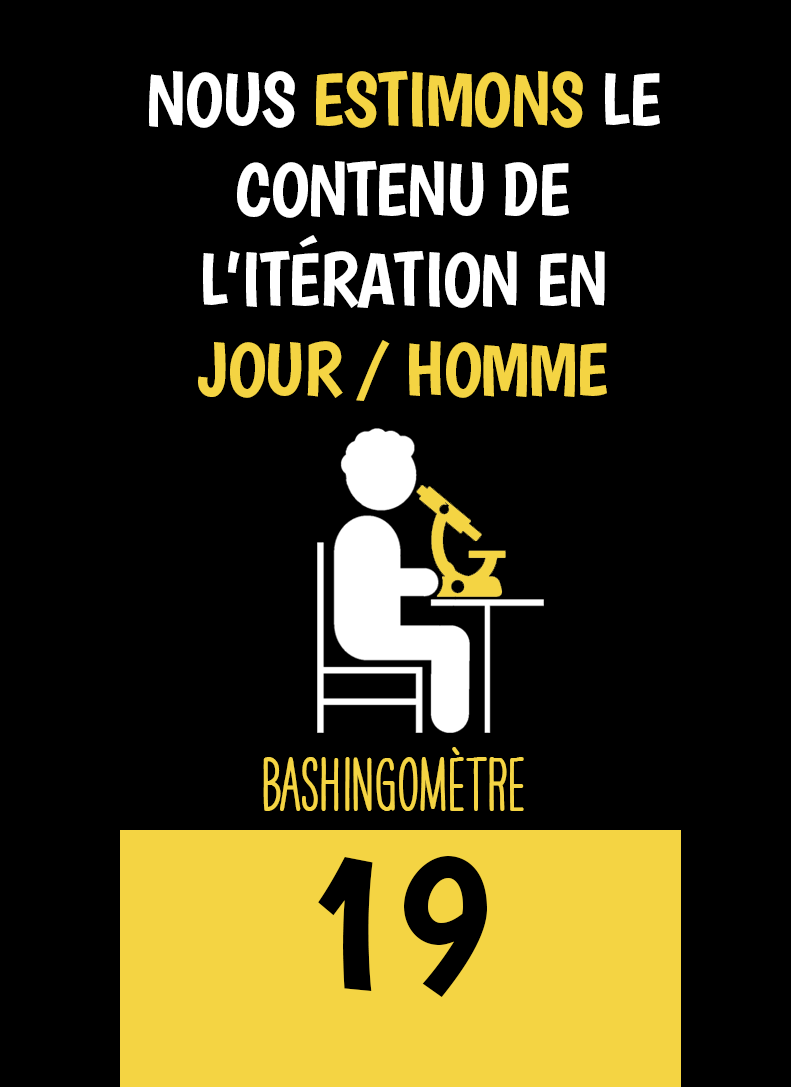
<style>
.page{position:relative;width:791px;height:1087px;background:#000000}
.page>*{position:absolute;margin:0}
.t1{font:75px "Boogaloo-Regular";letter-spacing:-0.02em;color:#ffffff}
.t2{font:75px "Boogaloo-Regular";letter-spacing:-0.02em;color:#f4d443}
.t3{font:66.7px "HAVEANICEDAYTallW04-Bold";color:#f4d443}
.t4{font:200px "Boogaloo-Regular";color:#000000}
</style>
<div class="page">
<p class="t1" style="left:149px;top:71px;width:511px;height:330px;text-align:center">NOUS <span class="t2">ESTIMONS</span> LE CONTENU DE<br>L’ITÉRATION EN<br><span class="t2">JOUR / HOMME</span></p>
<p class="t3" style="left:263px;top:747px;width:261px;height:64px">BASHINgomètre</p>
<p class="t4" style="left:318px;top:856px;width:169px;height:141px">19</p>
</div>
